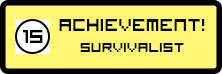
<style>
.page{position:relative;width:222px;height:74px;background:#fff774}
.page>*{position:absolute;margin:0}
.t1{font:25.3px "VisitorTT1BRK";color:#000000}
.t2{font:23px "VisitorTT1BRK";color:#000000}
.t3{font:18px "VisitorTT1BRK";color:#000000}
</style>
<div class="page">
<p class="t1" style="left:23px;top:30px;width:20px;height:13px">15</p>
<p class="t2" style="left:59px;top:19px;width:146px;height:33px;text-align:center">achievement!<br><span class="t3">Survivalist</span></p>
</div>
